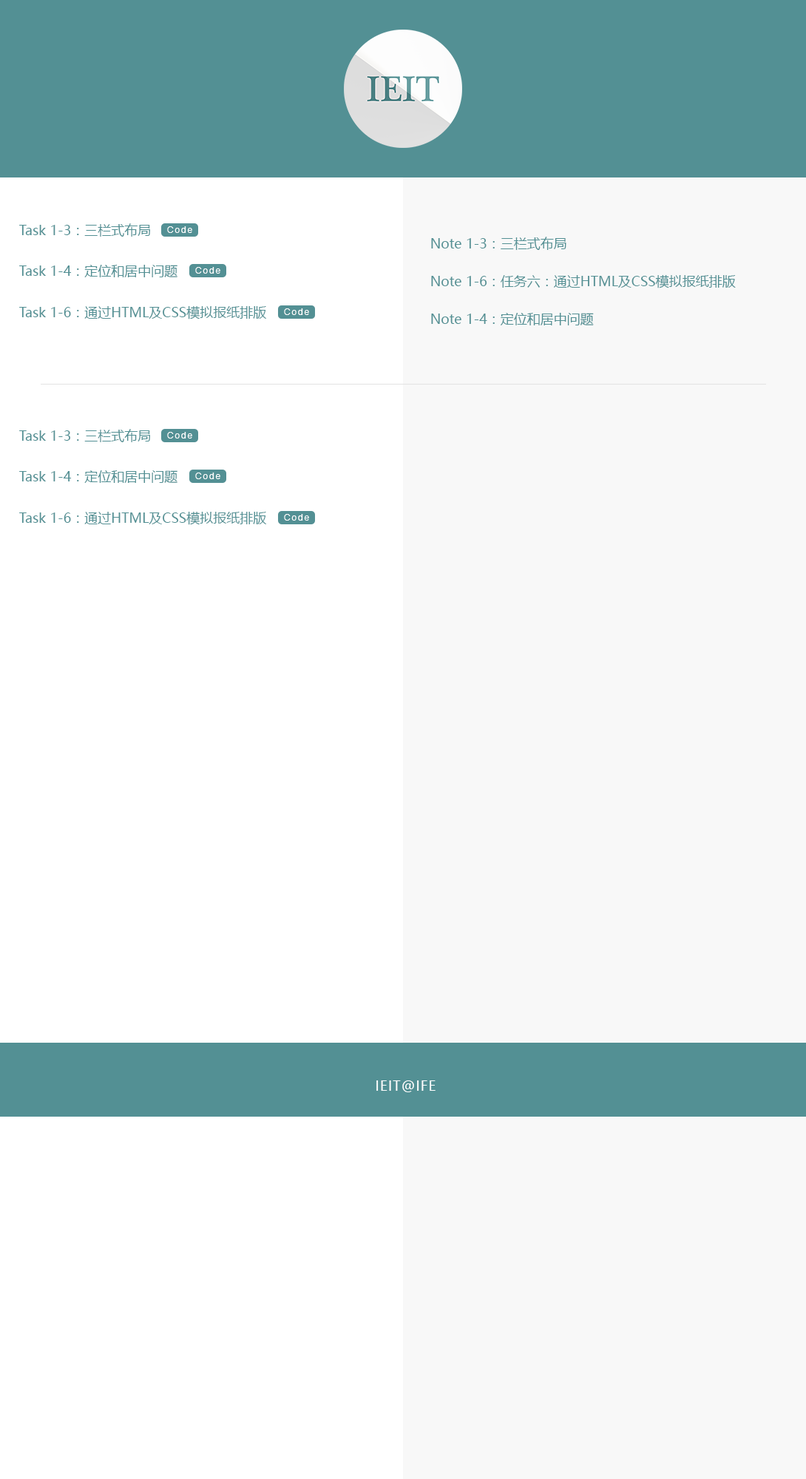
<style>
.page{position:relative;width:806px;height:1479px;background:#f8f8f8}
.page>*{position:absolute;margin:0}
.t1{font:13.3px "MicrosoftYaHei";color:#539094}
.t2{font:13.3px "MicrosoftYaHei";color:#539094;font-variant:small-caps}
.t3{font:8.9px "Helvetica";letter-spacing:0.15em;color:#ffffff}
.t4{font:13.3px "MicrosoftYaHei";letter-spacing:0.06em;color:#ffffff}
</style>
<div class="page">
<p class="t1" style="left:19px;top:223px;width:131px;height:14px">Task 1-3<span class="t2">：三栏式布局</span></p>
<p class="t3" style="left:167px;top:226px;width:25px;height:7px">Code</p>
<p class="t1" style="left:431px;top:237px;width:136px;height:13px">Note 1-3<span class="t2">：三栏式布局</span></p>
<p class="t1" style="left:19px;top:265px;width:159px;height:12px">Task 1-4：定位和居中问题</p>
<p class="t3" style="left:195px;top:267px;width:25px;height:7px">Code</p>
<p class="t1" style="left:431px;top:274px;width:305px;height:14px">Note 1-6：任务六：通过HTML及CSS模拟报纸排版</p>
<p class="t1" style="left:19px;top:305px;width:248px;height:15px">Task 1-6：通过HTML及CSS模拟报纸排版</p>
<p class="t3" style="left:284px;top:308px;width:25px;height:7px">Code</p>
<p class="t1" style="left:431px;top:313px;width:163px;height:12px">Note 1-4：定位和居中问题</p>
<p class="t1" style="left:19px;top:429px;width:131px;height:13px">Task 1-3<span class="t2">：三栏式布局</span></p>
<p class="t3" style="left:167px;top:432px;width:25px;height:7px">Code</p>
<p class="t1" style="left:19px;top:470px;width:159px;height:13px">Task 1-4：定位和居中问题</p>
<p class="t3" style="left:195px;top:473px;width:25px;height:6px">Code</p>
<p class="t1" style="left:19px;top:511px;width:248px;height:14px">Task 1-6：通过HTML及CSS模拟报纸排版</p>
<p class="t3" style="left:284px;top:514px;width:25px;height:7px">Code</p>
<p class="t4" style="left:376px;top:1081px;width:60px;height:11px">IEIT@IFE</p>
</div>
